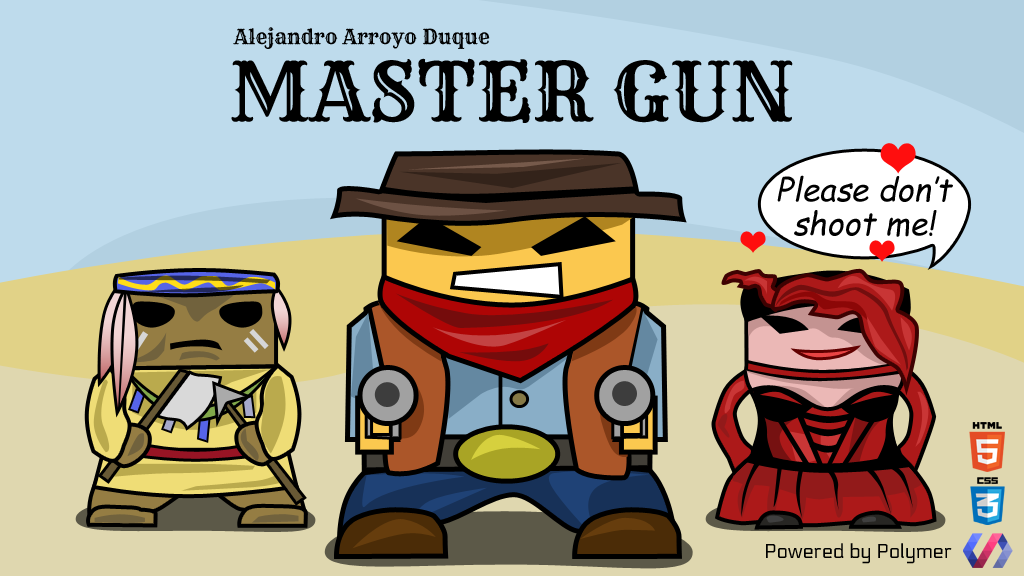
<style>
.page{position:relative;width:1024px;height:576px;background:#bedbec}
.page>*{position:absolute;margin:0}
.t1{font:20px "Rye-Regular";color:#000000}
.t2{font:80px "Rye-Regular";color:#000000}
.t3{font:32px/34.6px "ComicSansMS";color:#000000;font-style:italic}
.t4{font:20px "Electrolize-Regular";color:#000000}
</style>
<div class="page">
<p class="t1" style="left:233px;top:27px;width:257px;height:22px">Alejandro Arroyo Duque</p>
<p class="t2" style="left:231px;top:58px;width:562px;height:65px">MASTER GUN</p>
<p class="t3" style="left:777px;top:175px;width:176px;height:62px;text-align:center">Please don’t shoot me!</p>
<p class="t4" style="left:766px;top:543px;width:186px;height:21px">Powered by Polymer</p>
</div>
